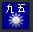
<style>
.page{position:relative;width:33px;height:32px;background:#000090}
.page>*{position:absolute;margin:0}
.t1{font:10.4px "SimSun";color:#ffffff}
</style>
<div class="page">
<p class="t1" style="left:6px;top:4px;width:19px;height:9px">九五</p>
</div>
